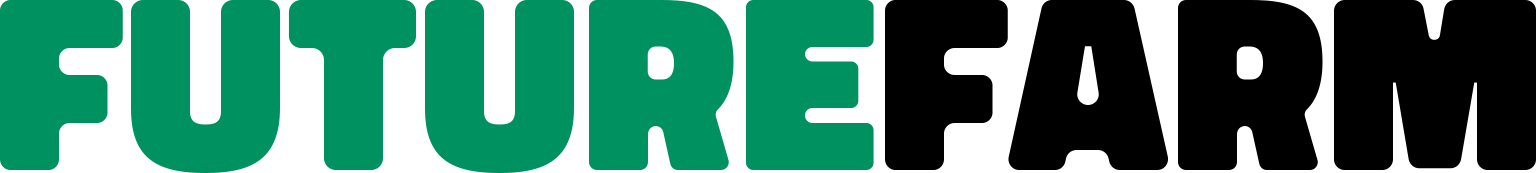
<style>
.page{position:relative;width:1536px;height:173px;background:#009161}
.page>*{position:absolute;margin:0}
.t1{font:254px "DonJose-Black";color:#009161}
.t2{font:254px "DonJose-Black";color:#000000}
</style>
<div class="page">
<p class="t1" style="left:0px;top:0px;width:1536px;height:173px">FUTURE<span class="t2">Farm</span></p>
</div>
